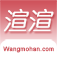
<style>
.page{position:relative;width:57px;height:57px;background:#ffffff}
.page>*{position:absolute;margin:0}
.t1{font:24px "YouYuan";color:#ffffff;font-weight:bold;font-style:italic}
.t2{font:6px "ArialMT";letter-spacing:0.05em;color:#cf515a}
</style>
<div class="page">
<p class="t1" style="left:3px;top:8px;width:51px;height:24px">渲渲</p>
<p class="t2" style="left:3px;top:46px;width:51px;height:7px">Wangmohan.com</p>
</div>
